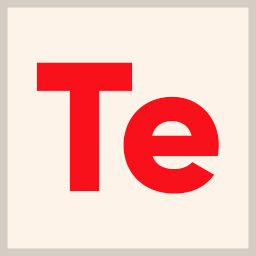
<style>
.page{position:relative;width:256px;height:256px;background:#fdf3e9}
.page>*{position:absolute;margin:0}
.t1{font:183.3px "Gilroy-ExtraBold";color:#f8101b}
</style>
<div class="page">
<p class="t1" style="left:36px;top:62px;width:183px;height:132px">Te</p>
</div>
